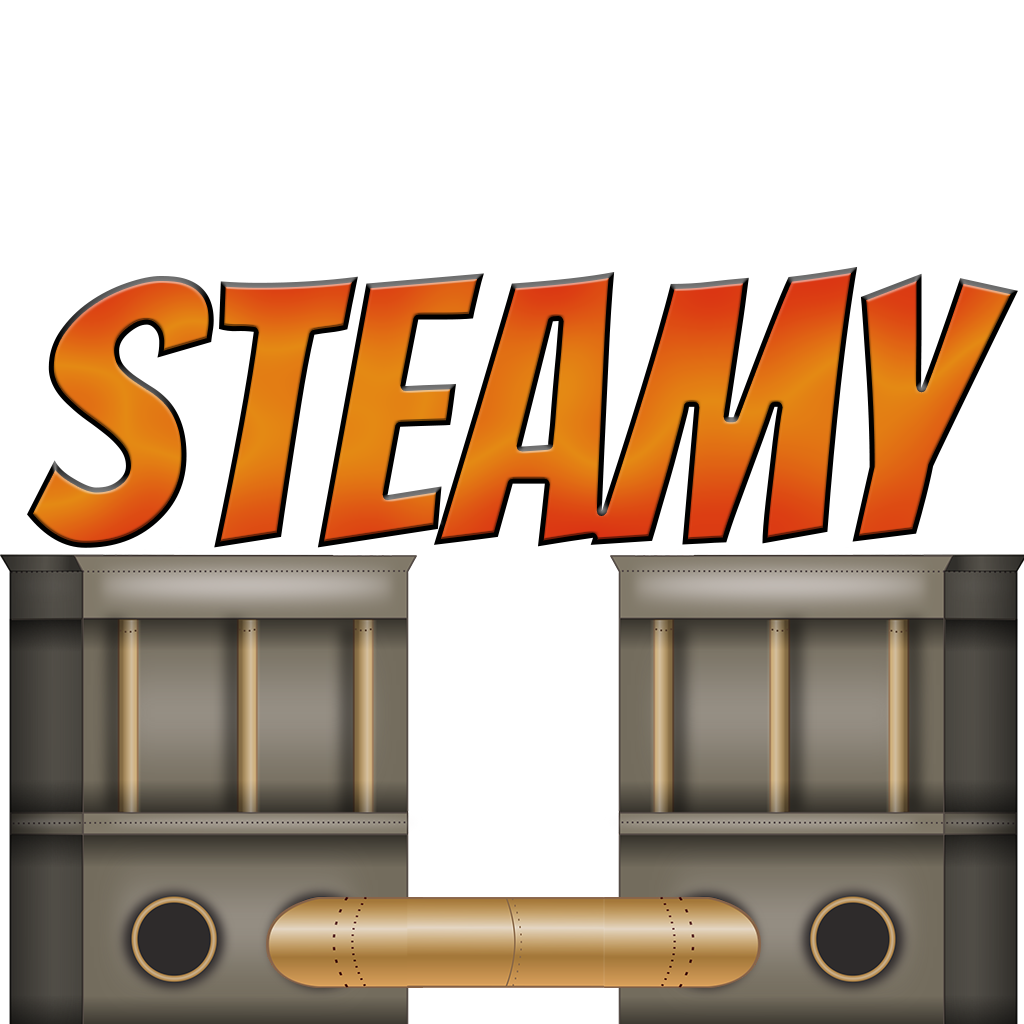
<style>
.page{position:relative;width:1024px;height:1024px;background:#ffffff}
.page>*{position:absolute;margin:0}
.t1{font:370.8px "Bangers-Regular"}
</style>
<div class="page">
<p class="t1" style="left:27px;top:266px;width:991px;height:282px">Steamy</p>
</div>
